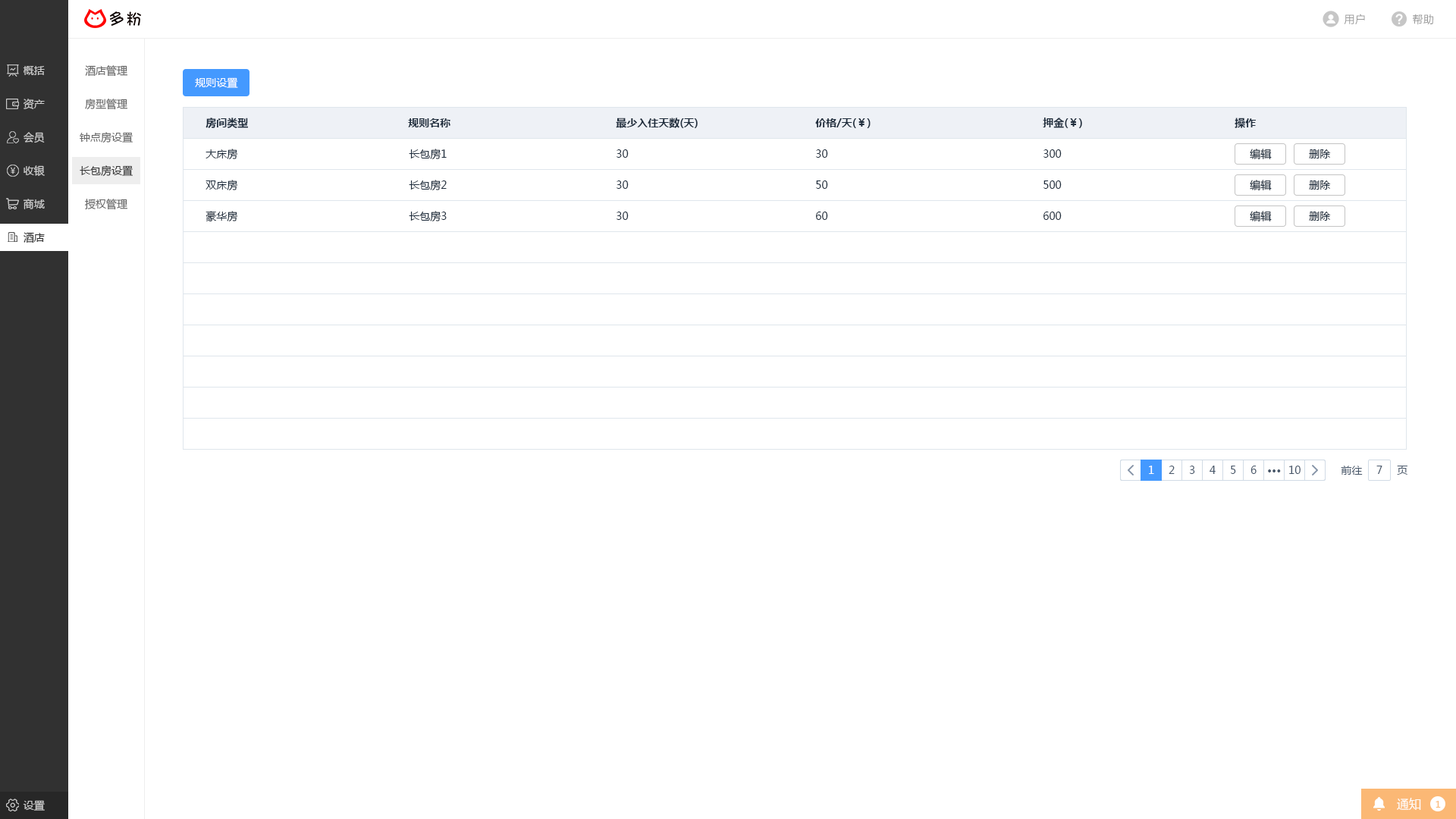
<style>
.page{position:relative;width:1456px;height:819px;background:#ffffff}
.page>*{position:absolute;margin:0}
.t1{font:10.6px "MicrosoftYaHei";letter-spacing:0.025em;color:#999999}
.t2{font:10.6px "MicrosoftYaHei";color:#cccccc}
.t3{font:10.6px "MicrosoftYaHei";color:#666666}
.t4{font:10.6px "MicrosoftYaHei";color:#ffffff}
.t5{font:10.6px "MicrosoftYaHei-Bold";color:#1f2d3d}
.t6{font:10.6px "MicrosoftYaHei";color:#1f2d3d}
.t7{font:10.6px "MicrosoftYaHei";color:#333333}
.t8{font:10.6px "MicrosoftYaHei";color:#313131}
.t9{font:10.6px "MicrosoftYaHei";color:#48576a}
.t10{font:10.6px "MicrosoftYaHei-Bold";color:#48576a}
.t11{font:12.1px "MicrosoftYaHei";color:#ffffff}
.t12{font:9.1px "MicrosoftYaHei";color:#fbb875}
</style>
<div class="page">
<p class="t1" style="left:1344px;top:14px;width:21px;height:11px">用户</p>
<p class="t1" style="left:1413px;top:14px;width:20px;height:11px">帮助</p>
<p class="t2" style="left:23px;top:66px;width:22px;height:9px">概括</p>
<p class="t3" style="left:85px;top:65px;width:42px;height:12px">酒店管理</p>
<p class="t4" style="left:195px;top:77px;width:43px;height:11px">规则设置</p>
<p class="t2" style="left:24px;top:99px;width:21px;height:10px">资产</p>
<p class="t3" style="left:85px;top:99px;width:42px;height:11px">房型管理</p>
<p class="t5" style="left:206px;top:118px;width:42px;height:10px">房间类型</p>
<p class="t5" style="left:408px;top:118px;width:42px;height:9px">规则名称</p>
<p class="t5" style="left:616px;top:118px;width:82px;height:10px">最少入住天数(天)</p>
<p class="t5" style="left:815px;top:118px;width:56px;height:10px">价格/天(￥)</p>
<p class="t5" style="left:1043px;top:118px;width:39px;height:10px">押金(￥)</p>
<p class="t5" style="left:1235px;top:118px;width:21px;height:10px">操作</p>
<p class="t2" style="left:24px;top:132px;width:21px;height:11px">会员</p>
<p class="t3" style="left:80px;top:132px;width:53px;height:11px">钟点房设置</p>
<p class="t6" style="left:206px;top:149px;width:32px;height:11px">大床房</p>
<p class="t6" style="left:409px;top:149px;width:38px;height:11px">长包房1</p>
<p class="t6" style="left:617px;top:149px;width:12px;height:9px">30</p>
<p class="t6" style="left:816px;top:149px;width:12px;height:9px">30</p>
<p class="t6" style="left:1043px;top:149px;width:19px;height:9px">300</p>
<p class="t6" style="left:1250px;top:149px;width:22px;height:10px">编辑</p>
<p class="t6" style="left:1309px;top:149px;width:22px;height:9px">删除</p>
<p class="t2" style="left:24px;top:165px;width:21px;height:11px">收银</p>
<p class="t7" style="left:80px;top:165px;width:53px;height:12px">长包房设置</p>
<p class="t6" style="left:206px;top:180px;width:32px;height:11px">双床房</p>
<p class="t6" style="left:409px;top:180px;width:38px;height:11px">长包房2</p>
<p class="t6" style="left:617px;top:180px;width:12px;height:9px">30</p>
<p class="t6" style="left:816px;top:180px;width:12px;height:9px">50</p>
<p class="t6" style="left:1043px;top:180px;width:19px;height:9px">500</p>
<p class="t6" style="left:1250px;top:180px;width:22px;height:10px">编辑</p>
<p class="t6" style="left:1309px;top:180px;width:22px;height:10px">删除</p>
<p class="t2" style="left:23px;top:199px;width:22px;height:10px">商城</p>
<p class="t3" style="left:85px;top:199px;width:42px;height:11px">授权管理</p>
<p class="t6" style="left:206px;top:211px;width:32px;height:11px">豪华房</p>
<p class="t6" style="left:409px;top:211px;width:38px;height:11px">长包房3</p>
<p class="t6" style="left:617px;top:212px;width:12px;height:8px">30</p>
<p class="t6" style="left:816px;top:212px;width:12px;height:8px">60</p>
<p class="t6" style="left:1043px;top:212px;width:19px;height:8px">600</p>
<p class="t6" style="left:1250px;top:211px;width:22px;height:10px">编辑</p>
<p class="t6" style="left:1309px;top:212px;width:22px;height:9px">删除</p>
<p class="t8" style="left:24px;top:232px;width:21px;height:11px">酒店</p>
<p class="t4" style="left:1149px;top:466px;width:5px;height:8px">1</p>
<p class="t9" style="left:1169px;top:466px;width:6px;height:8px">2</p>
<p class="t9" style="left:1189px;top:466px;width:6px;height:8px">3</p>
<p class="t9" style="left:1210px;top:466px;width:6px;height:8px">4</p>
<p class="t9" style="left:1231px;top:466px;width:5px;height:8px">5</p>
<p class="t9" style="left:1250px;top:466px;width:7px;height:8px">6</p>
<p class="t10" style="left:1268px;top:469px;width:13px;height:3px">···</p>
<p class="t9" style="left:1289px;top:466px;width:12px;height:8px">10</p>
<p class="t9" style="left:1341px;top:466px;width:22px;height:9px">前往</p>
<p class="t9" style="left:1376px;top:466px;width:6px;height:8px">7</p>
<p class="t9" style="left:1397px;top:466px;width:10px;height:9px">页</p>
<p class="t11" style="left:1397px;top:798px;width:24px;height:12px">通知</p>
<p class="t2" style="left:23px;top:800px;width:22px;height:11px">设置</p>
<p class="t12" style="left:1436px;top:801px;width:5px;height:7px">1</p>
</div>
